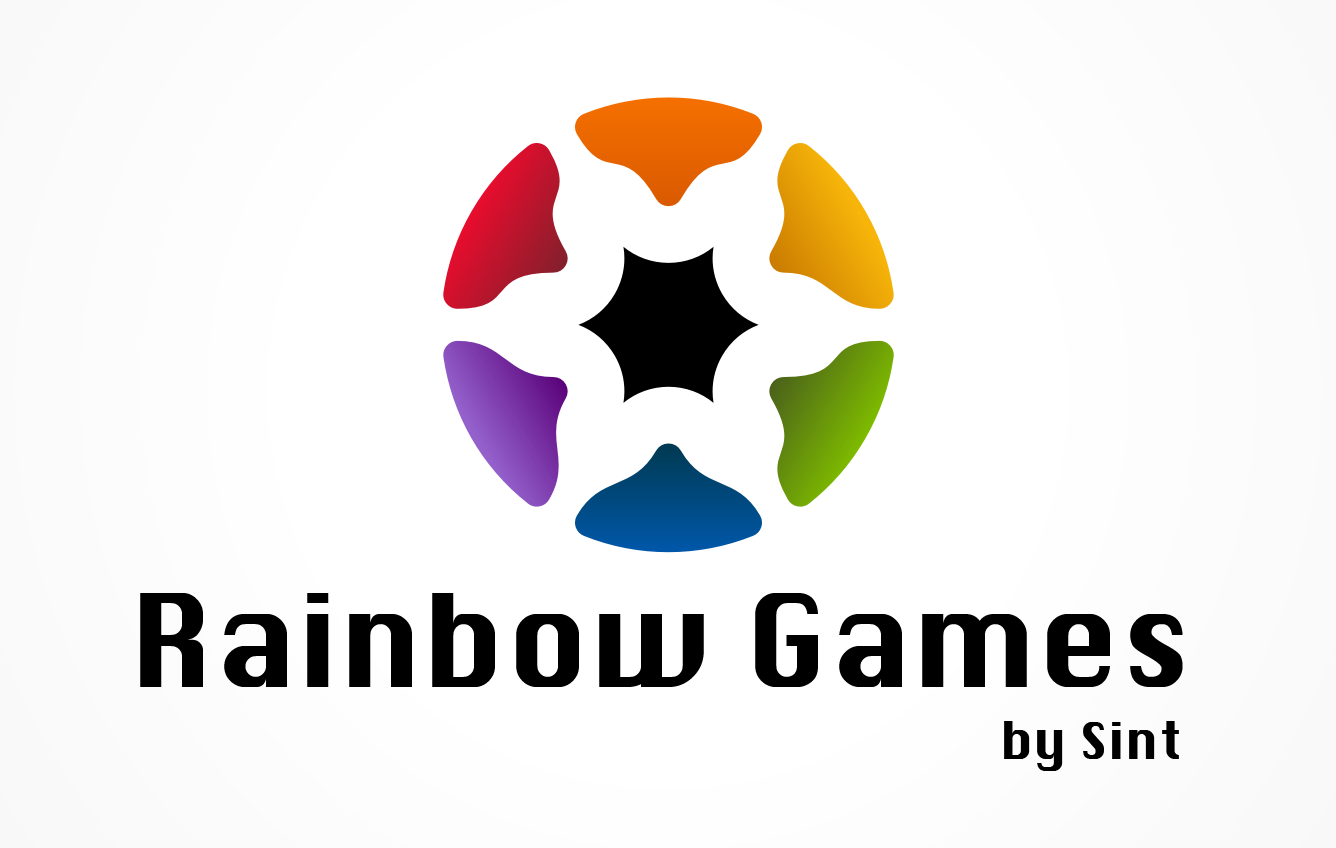
<style>
.page{position:relative;width:1336px;height:848px;background:#ffffff}
.page>*{position:absolute;margin:0}
.t1{font:125px "Silom";color:#000000}
.t2{font:50px "Silom";color:#000000}
</style>
<div class="page">
<p class="t1" style="left:140px;top:593px;width:1043px;height:94px">Rainbow Games</p>
<p class="t2" style="left:1004px;top:721px;width:175px;height:50px">by Sint</p>
</div>
